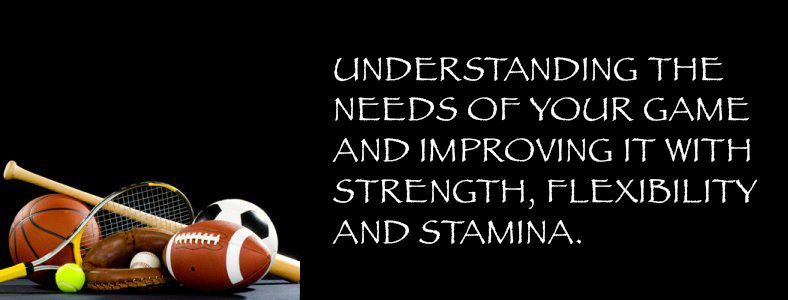
<style>
.page{position:relative;width:788px;height:300px;background:#000000}
.page>*{position:absolute;margin:0}
.t1{font:34px "Papyrus";letter-spacing:0.025em;color:#fefefe}
</style>
<div class="page">
<p class="t1" style="left:332px;top:57px;width:425px;height:187px">UNDERSTANDING THE NEEDS OF YOUR GAME AND IMPROVING IT WITH STRENGTH, FLEXIBILITY AND STAMINA.</p>
</div>
